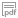
<style>
.page{position:relative;width:18px;height:18px;background:#ffffff}
.page>*{position:absolute;margin:0}
.t1{font:8px "MyriadPro-Regular";color:#9a9a9a}
</style>
<div class="page">
<p class="t1" style="left:4px;top:9px;width:13px;height:8px">pdf</p>
</div>
